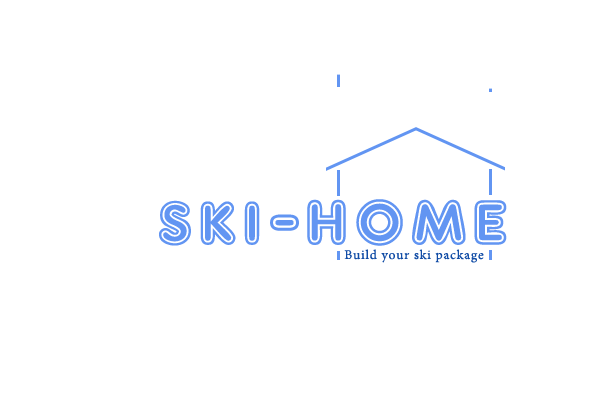
<style>
.page{position:relative;width:600px;height:400px;background:#ffffff}
.page>*{position:absolute;margin:0}
.t1{font:80px "ARDELANEY";letter-spacing:0.065em;color:#6295f2}
.t2{font:83px "ARDELANEY";letter-spacing:0.065em;color:#6295f2}
.t3{font:13px "AdobeHebrew-Regular";letter-spacing:0.065em;color:#124da6}
</style>
<div class="page">
<p class="t1" style="left:159px;top:200px;width:140px;height:46px">ski-</p>
<p class="t2" style="left:307px;top:199px;width:200px;height:47px">home</p>
<p class="t3" style="left:344px;top:249px;width:140px;height:14px">Build your ski package</p>
</div>
